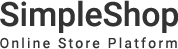
<style>
.page{position:relative;width:178px;height:49px;background:#ffffff}
.page>*{position:absolute;margin:0}
.t1{font:33.5px "Roboto-Medium";color:#333333}
.t2{font:14px "Roboto-Regular";letter-spacing:0.16em;color:#333333}
</style>
<div class="page">
<p class="t1" style="left:0px;top:0px;width:178px;height:33px">SimpleShop</p>
<p class="t2" style="left:0px;top:37px;width:177px;height:12px">Online Store Platform</p>
</div>
